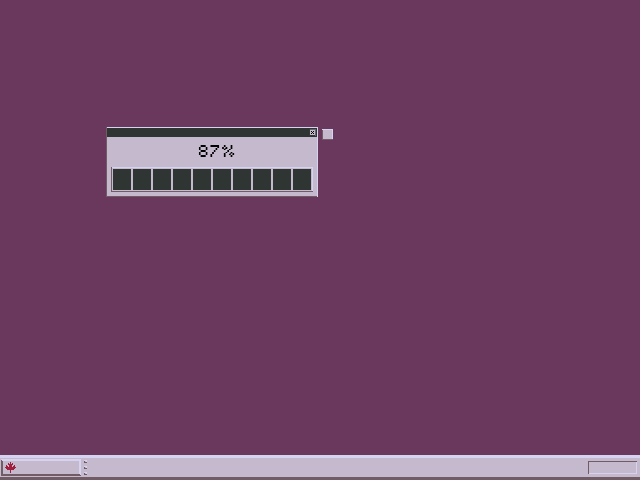
<style>
.page{position:relative;width:640px;height:480px;background:#69385c}
.page>*{position:absolute;margin:0}
.t1{font:16.7px "SFPixelate";color:#000000}
</style>
<div class="page">
<p class="t1" style="left:198px;top:145px;width:37px;height:12px">87%</p>
</div>
